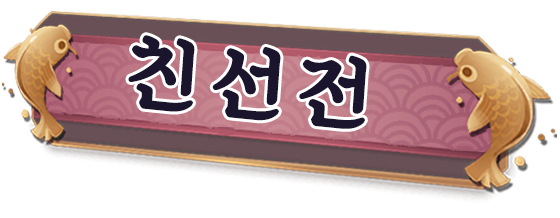
<style>
.page{position:relative;width:560px;height:218px;background:#ffffff}
.page>*{position:absolute;margin:0}
.t1{font:80.6px "SDKukdetopokki-aLt";letter-spacing:0.14em;color:#1b142d;font-weight:bold}
</style>
<div class="page">
<p class="t1" style="left:128px;top:35px;width:239px;height:94px;rotate:6deg">친선전</p>
</div>
